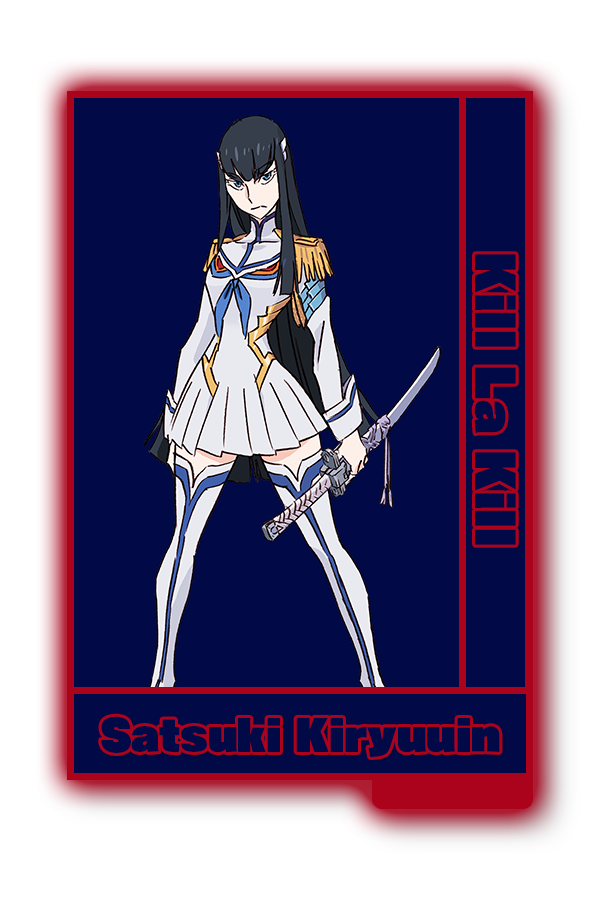
<style>
.page{position:relative;width:600px;height:900px;background:#010947}
.page>*{position:absolute;margin:0}
.t1{font:48.8px "RaglanPunchStd-UB";color:#010947}
.t2{font:40.6px "RaglanPunchStd-UB";color:#010947}
</style>
<div class="page">
<p class="t1" style="left:474px;top:254px;width:42px;height:291px;rotate:90deg">Kill La Kill</p>
<p class="t2" style="left:101px;top:716px;width:399px;height:41px">Satsuki Kiryuuin</p>
</div>
